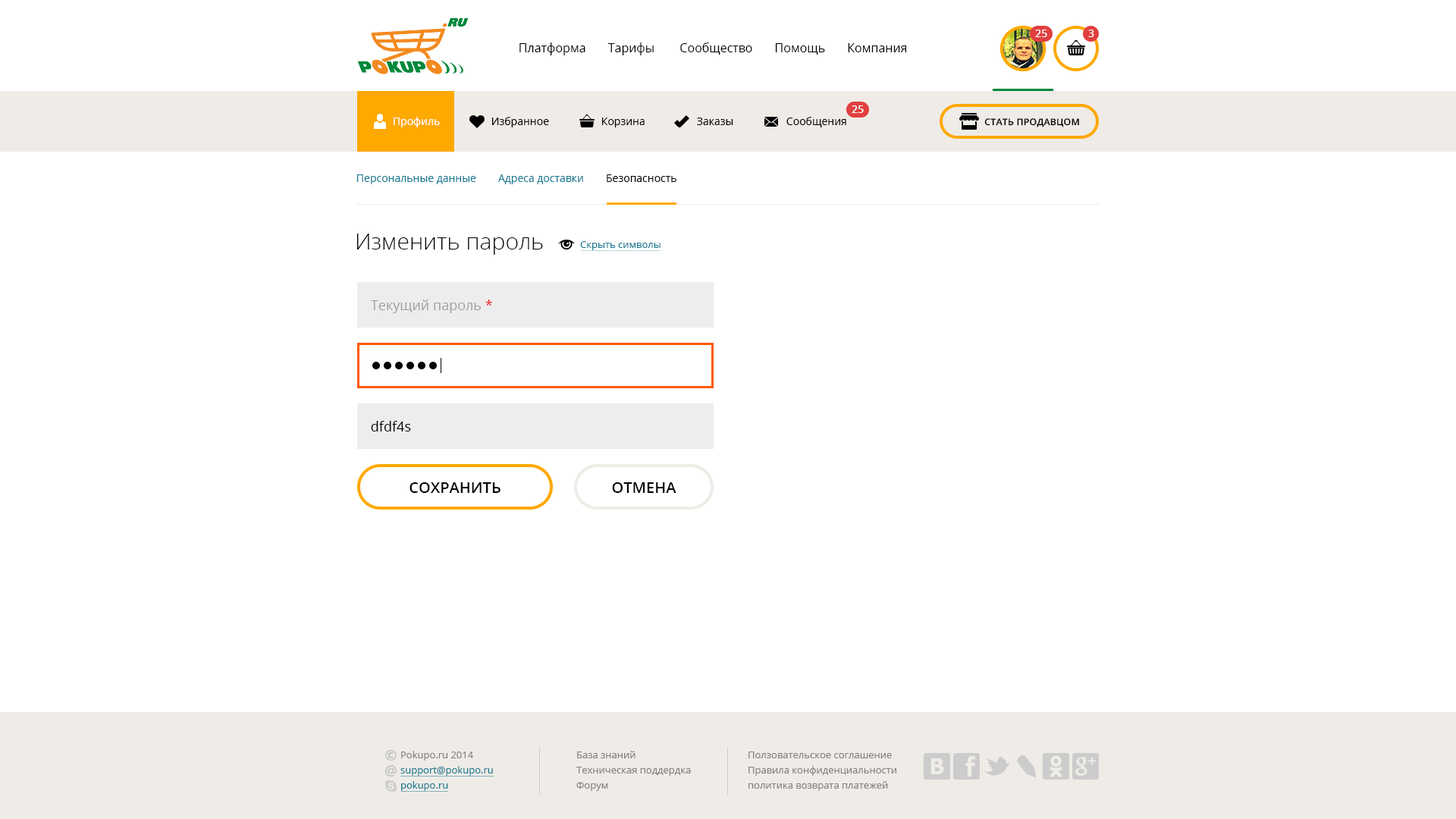
<style>
.page{position:relative;width:1456px;height:819px;background:#ffffff}
.page>*{position:absolute;margin:0}
.t1{font:10.6px "OpenSans-Semibold";letter-spacing:0.025em;color:#ffffff}
.t2{font:12.1px "OpenSans";color:#010101}
.t3{font:10.6px "OpenSans";color:#ffffff}
.t4{font:10.6px "OpenSans";color:#010101}
.t5{font:9.1px "OpenSans-Semibold";letter-spacing:0.025em;color:#000000;text-transform:uppercase}
.t6{font:10.6px "OpenSans";color:#177a93}
.t7{font:10.6px "OpenSans";color:#000000}
.t8{font:22.7px "OpenSans-Light";color:#000000}
.t9{font:9.9px "OpenSans";color:#177a93}
.t10{font:13.6px "OpenSans";color:#a1a1a1}
.t11{font:13.6px "OpenSans";color:#ed1c24}
.t12{font:13.6px "OpenSans";color:#000000}
.t13{font:15.2px "OpenSans-Semibold";color:#000000;text-transform:uppercase}
</style>
<div class="page">
<p class="t1" style="left:1035px;top:30px;width:12px;height:7px">25</p>
<p class="t1" style="left:1088px;top:30px;width:6px;height:7px">3</p>
<p class="t2" style="left:519px;top:42px;width:388px;height:13px">Платформа       Тарифы        Сообщество       Помощь       Компания</p>
<p class="t1" style="left:852px;top:105px;width:12px;height:8px">25</p>
<p class="t3" style="left:394px;top:117px;width:46px;height:10px">Профиль</p>
<p class="t4" style="left:492px;top:117px;width:57px;height:10px">Избранное</p>
<p class="t4" style="left:602px;top:118px;width:43px;height:9px">Корзина</p>
<p class="t4" style="left:697px;top:118px;width:36px;height:7px">Заказы</p>
<p class="t4" style="left:786px;top:117px;width:60px;height:10px">Сообщения</p>
<p class="t5" style="left:984px;top:118px;width:95px;height:9px">стать продавцом</p>
<p class="t6" style="left:357px;top:174px;width:319px;height:10px">Персональные данные       Адреса доставки       <span class="t7">Безопасность</span></p>
<p class="t8" style="left:356px;top:234px;width:187px;height:21px">Изменить пароль</p>
<p class="t9" style="left:580px;top:241px;width:80px;height:9px">Скрыть символы</p>
<p class="t10" style="left:370px;top:300px;width:122px;height:13px">Текущий пароль <span class="t11">*</span></p>
<p class="t12" style="left:371px;top:421px;width:40px;height:10px">dfdf4s</p>
<p class="t13" style="left:409px;top:482px;width:91px;height:11px">сохранить</p>
<p class="t13" style="left:612px;top:482px;width:64px;height:11px">отмена</p>
</div>
